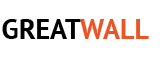
<style>
.page{position:relative;width:160px;height:60px;background:#ffffff}
.page>*{position:absolute;margin:0}
.t1{font:28px "PTSans-Bold";color:#000000}
.t2{font:28px "PTSans-Bold";color:#eb5424}
</style>
<div class="page">
<p class="t1" style="left:2px;top:19px;width:147px;height:20px">GREAT<span class="t2">WALL</span></p>
</div>
